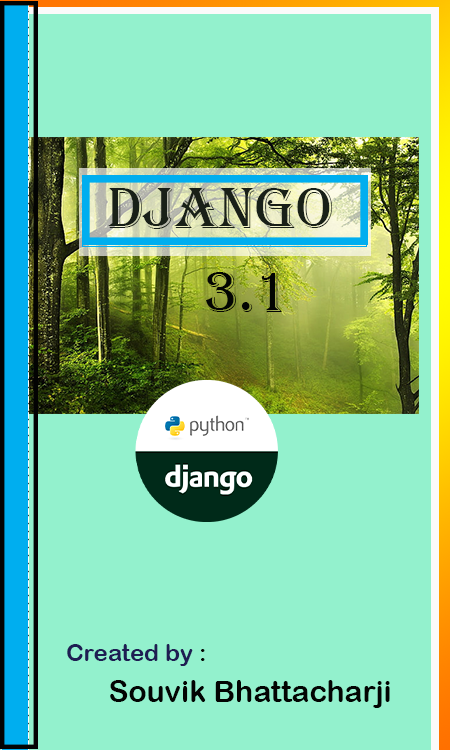
<style>
.page{position:relative;width:450px;height:750px;background:#93f1cd}
.page>*{position:absolute;margin:0}
.t1{font:60px "Algerian";color:#192018}
.t2{font:60px "Algerian";color:#030503}
.t3{font:24px "ArialRoundedMTBold";color:#1e1d53}
.t4{font:24px "ArialRoundedMTBold";color:#030503}
.t5{font:30px "ArialRoundedMTBold";color:#030503}
</style>
<div class="page">
<p class="t1" style="left:108px;top:188px;width:224px;height:41px">Django 3.0</p>
<p class="t2" style="left:206px;top:272px;width:76px;height:40px">3.1</p>
<p class="t3" style="left:67px;top:644px;width:138px;height:22px">Created by<span class="t4"> :</span></p>
<p class="t5" style="left:110px;top:680px;width:280px;height:28px">Souvik Bhattacharji</p>
</div>
